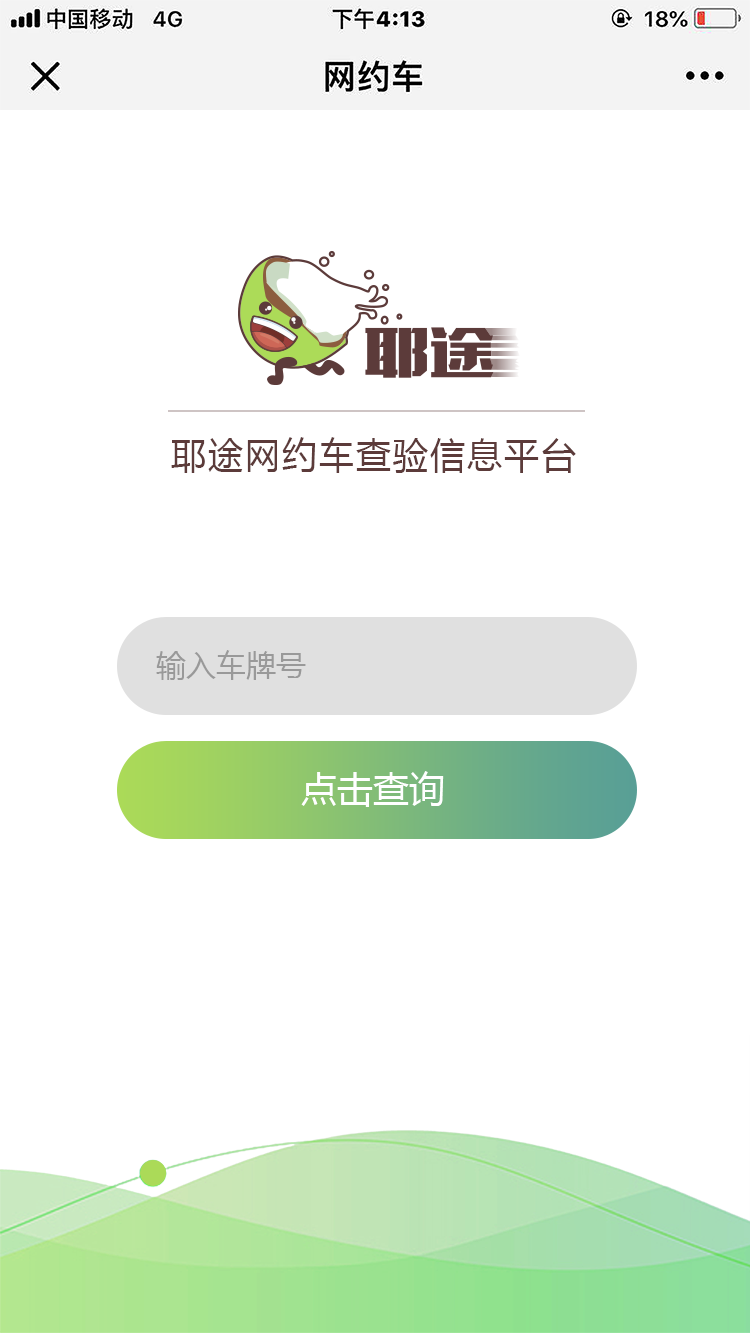
<style>
.page{position:relative;width:750px;height:1333px;background:#ffffff}
.page>*{position:absolute;margin:0}
.t1{font:36px "MicrosoftYaHei";letter-spacing:0.05em;color:#5c3b3a}
.t2{font:30px "MicrosoftYaHei";color:#999999}
.t3{font:36px "MicrosoftYaHei";color:#ffffff}
</style>
<div class="page">
<p class="t1" style="left:171px;top:437px;width:405px;height:36px">耶途网约车查验信息平台</p>
<p class="t2" style="left:156px;top:650px;width:150px;height:30px">输入车牌号</p>
<p class="t3" style="left:301px;top:771px;width:143px;height:36px">点击查询</p>
</div>
